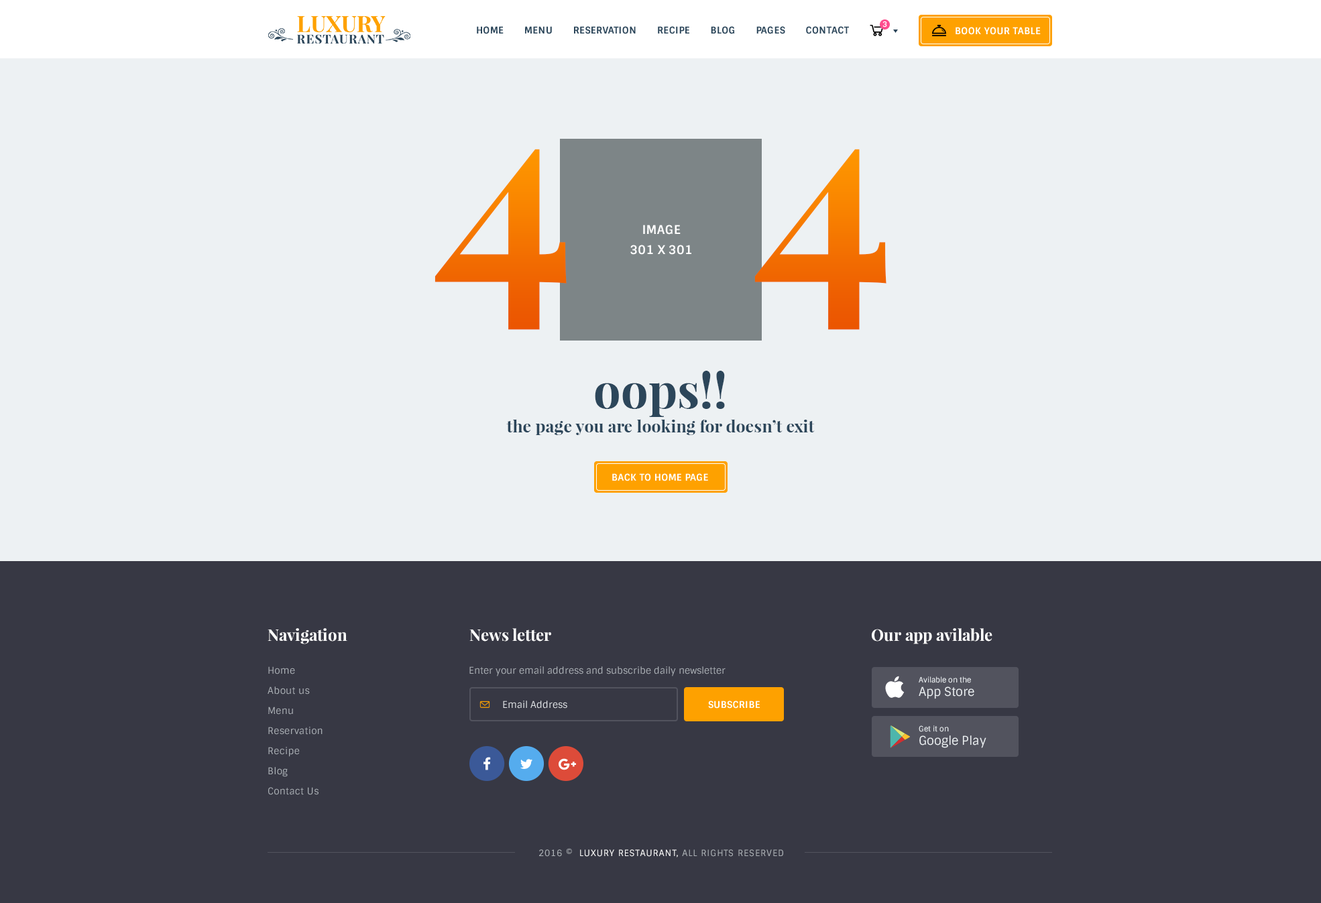
<style>
.page{position:relative;width:1321px;height:903px;background:#edf1f3}
.page>*{position:absolute;margin:0}
.t1{font:9.4px "Sintony-Bold";letter-spacing:0.025em;color:#2c465a;text-transform:uppercase}
.t2{font:7.4px "Sintony-Bold";letter-spacing:0.025em;color:#ffffff;text-transform:uppercase}
.t3{font:9.4px "Sintony-Bold";letter-spacing:0.025em;color:#ffffff;text-transform:uppercase}
.t4{font:268.1px "PlayfairDisplay-Bold";color:#f26c01}
.t5{font:12.1px/20.1px "Sintony-Bold";letter-spacing:0.005em;color:#ffffff;text-transform:uppercase}
.t6{font:16.8px/24.1px "PlayfairDisplay-Bold";color:#2c465a}
.t7{font:48.3px/24.1px "PlayfairDisplay-Bold";color:#2c465a}
.t8{font:16.1px "PlayfairDisplay-Bold";color:#ffffff}
.t9{font:9.4px/20.1px "Sintony";letter-spacing:0.025em;color:#adb2b7}
.t10{font:9.4px "Sintony";color:#adb2b7}
.t11{font:7.4px/13.4px "Sintony";color:#edf1f3}
.t12{font:12.1px/13.4px "Sintony";color:#edf1f3}
.t13{font:9.4px "Sintony";color:#e6e9eb}
.t14{font:8.7px "Sintony";letter-spacing:0.075em;color:#adb2b7;text-transform:uppercase}
.t15{font:8.7px "Sintony";letter-spacing:0.075em;color:#ffffff;text-transform:uppercase}
</style>
<div class="page">
<p class="t1" style="left:477px;top:26px;width:372px;height:8px">Home       menu       reservation       recipe       blog       Pages       contact</p>
<p class="t2" style="left:882px;top:21px;width:5px;height:6px">3</p>
<p class="t3" style="left:955px;top:27px;width:85px;height:8px">Book your table</p>
<p class="t4" style="left:434px;top:149px;width:452px;height:181px">4   4</p>
<p class="t5" style="left:630px;top:225px;width:61px;height:30px;text-align:center">image<br>301 x 301</p>
<p class="t6" style="left:506px;top:371px;width:308px;height:64px;text-align:center"><span class="t7">oops!!<br></span>the page you are looking for doesn’t exit</p>
<p class="t3" style="left:612px;top:473px;width:96px;height:8px">back to home page</p>
<p class="t8" style="left:267px;top:628px;width:80px;height:16px">Navigation</p>
<p class="t8" style="left:469px;top:628px;width:82px;height:14px">News letter</p>
<p class="t8" style="left:871px;top:628px;width:121px;height:16px">Our app avilable</p>
<p class="t9" style="left:267px;top:666px;width:55px;height:129px">Home<br>About us<br>Menu<br>Reservation<br>Recipe<br>Blog<br>Contact Us</p>
<p class="t10" style="left:469px;top:666px;width:256px;height:10px">Enter your email address and subscribe daily newsletter</p>
<p class="t11" style="left:918px;top:676px;width:56px;height:23px">Avilable on the<br><span class="t12">App Store</span></p>
<p class="t13" style="left:503px;top:701px;width:64px;height:8px">Email Address</p>
<p class="t3" style="left:708px;top:701px;width:52px;height:8px">Subscribe</p>
<p class="t12" style="left:918px;top:725px;width:68px;height:23px"><span class="t11">Get it on<br></span>Google Play</p>
<p class="t14" style="left:539px;top:848px;width:244px;height:9px">2016 ©  <span class="t15">Luxury RestaurAnt,</span> All rights reserved</p>
</div>
